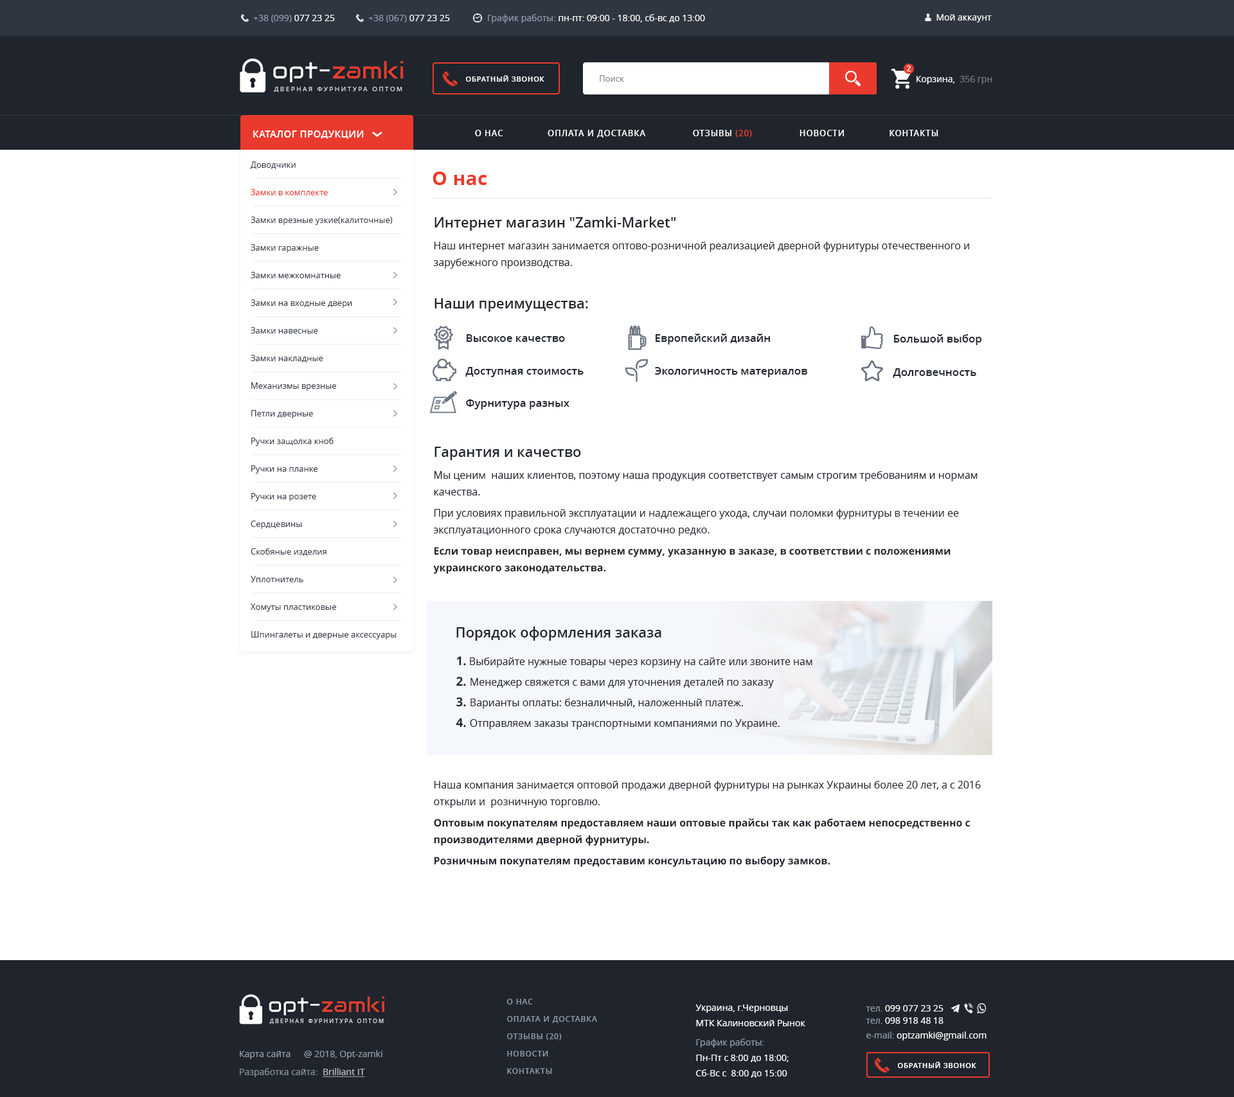
<style>
.page{position:relative;width:1234px;height:1097px;background:#ffffff}
.page>*{position:absolute;margin:0}
.t1{font:9px "OpenSans";color:#9099a7}
.t2{font:9px "OpenSans";color:#ffffff}
.t3{font:7.7px "OpenSans-Semibold";color:#ffffff}
.t4{font:7.1px "OpenSans-Semibold";letter-spacing:0.075em;color:#ffffff;text-transform:uppercase}
.t5{font:8.4px "OpenSans";color:#79818d}
.t6{font:9px "OpenSans";color:#747b86}
.t7{font:6.4px "OpenSans";letter-spacing:0.26em;color:#dfdfe0;text-transform:uppercase}
.t8{font:9.6px "OpenSans-Semibold";letter-spacing:0.025em;color:#ffffff;text-transform:uppercase}
.t9{font:8.4px "OpenSans-Semibold";letter-spacing:0.07em;color:#ffffff;text-transform:uppercase}
.t10{font:8.4px "OpenSans-Semibold";letter-spacing:0.07em;color:#ea3a2d;text-transform:uppercase}
.t11{font:8.4px/27.7px "OpenSans";color:#373e4a}
.t12{font:8.4px/27.7px "OpenSans";color:#ea3a2d}
.t13{font:19.3px "OpenSans-Bold";letter-spacing:0.01em;color:#ea3a2d}
.t14{font:14.1px "OpenSans-Semibold";color:#20252d}
.t15{font:10.3px/16.8px "OpenSans";color:#20252d}
.t16{font:10.9px "OpenSans-Semibold";color:#20252d}
.t17{font:10.3px/21.3px "OpenSans";color:#20252d}
.t18{font:10.3px/21.3px "OpenSans-Bold";color:#20252d}
.t19{font:10.3px/16.8px "OpenSans-Bold";color:#20252d}
.t20{font:10.3px/20.6px "OpenSans";color:#20252d}
.t21{font:12.2px/20.6px "OpenSans-Bold";color:#20252d}
.t22{font:7.7px/17.4px "OpenSans-Semibold";letter-spacing:0.07em;color:#9099a7;text-transform:uppercase}
.t23{font:9px/15.4px "OpenSans";color:#ffffff}
.t24{font:9px/19.3px "OpenSans";color:#9099a7}
.t25{font:9px/14.8px "OpenSans";color:#ffffff}
.t26{font:9px/14.8px "OpenSans";color:#9099a7}
.t27{font:9px/12.2px "OpenSans";color:#ffffff}
.t28{font:9px/12.2px "OpenSans";color:#9099a7}
.t29{font:5.6px "OpenSans";letter-spacing:0.26em;color:#dfdfe0;text-transform:uppercase}
.t30{font:9px "OpenSans";color:#868f9c}
.t31{font:9px "OpenSans";color:#bebebe;text-decoration:underline}
</style>
<div class="page">
<p class="t1" style="left:253px;top:15px;width:82px;height:7px">+38 (099)<span class="t2"> 077 23 25</span></p>
<p class="t1" style="left:368px;top:15px;width:82px;height:7px">+38 (067)<span class="t2"> 077 23 25</span></p>
<p class="t2" style="left:488px;top:14px;width:217px;height:9px"><span class="t1">График работы: </span>пн-пт: 09:00 - 18:00, сб-вс до 13:00</p>
<p class="t2" style="left:937px;top:14px;width:55px;height:8px">Мой аккаунт</p>
<p class="t3" style="left:907px;top:66px;width:5px;height:5px">2</p>
<p class="t4" style="left:466px;top:75px;width:78px;height:7px">Обратный звонок</p>
<p class="t5" style="left:600px;top:75px;width:24px;height:7px">Поиск</p>
<p class="t2" style="left:917px;top:76px;width:76px;height:8px">Корзина,  <span class="t6">356 грн</span></p>
<p class="t7" style="left:274px;top:87px;width:128px;height:5px">Дверная фурнитура оптом</p>
<p class="t8" style="left:253px;top:130px;width:111px;height:9px">каталог продукции</p>
<p class="t9" style="left:475px;top:130px;width:464px;height:8px">о нас                оплата и доставка                 Отзывы <span class="t10">(20) </span>                НОВОСТИ                Контакты</p>
<p class="t11" style="left:251px;top:161px;width:146px;height:479px">Доводчики<br><span class="t12">Замки в комплекте<br></span>Замки врезные узкие(калиточные)<br>Замки гаражные<br>Замки межкомнатные<br>Замки на входные двери<br>Замки навесные<br>Замки накладные<br>Механизмы врезные<br>Петли дверные<br>Ручки защолка кноб<br>Ручки на планке<br>Ручки на розете<br>Сердцевины<br>Скобяные изделия<br>Уплотнитель<br>Хомуты пластиковые<br>Шпингалеты и дверные аксессуары</p>
<p class="t13" style="left:433px;top:172px;width:54px;height:13px">О нас</p>
<p class="t14" style="left:435px;top:217px;width:241px;height:14px">Интернет магазин "Zamki-Market"</p>
<p class="t15" style="left:433px;top:242px;width:536px;height:27px">Наш интернет магазин занимается оптово-розничной реализацией дверной фурнитуры отечественного и зарубежного производства.</p>
<p class="t14" style="left:435px;top:298px;width:153px;height:14px">Наши преимущества:</p>
<p class="t16" style="left:467px;top:334px;width:98px;height:8px">Высокое качество</p>
<p class="t16" style="left:656px;top:334px;width:114px;height:11px">Европейский дизайн</p>
<p class="t16" style="left:894px;top:334px;width:88px;height:11px">Большой выбор товаров</p>
<p class="t16" style="left:465px;top:367px;width:119px;height:10px">Доступная стоимость</p>
<p class="t16" style="left:655px;top:367px;width:152px;height:10px">Экологичность материалов</p>
<p class="t16" style="left:893px;top:368px;width:84px;height:10px">Долговечность</p>
<p class="t16" style="left:466px;top:399px;width:104px;height:11px">Фурнитура разных типов</p>
<p class="t14" style="left:435px;top:447px;width:146px;height:13px">Гарантия и качество</p>
<p class="t15" style="left:433px;top:471px;width:545px;height:103px">Мы ценим  наших клиентов, поэтому наша продукция соответствует самым строгим требованиям и нормам качества.<span class="t17"><br>При условия</span>х правильной эксплуатации и надлежащего ухода, случаи поломки фурнитуры в течении ее эксплуатационного срока случаются достаточно редко. <br><span class="t18">Если товар неисправен, мы вернем сумму, указанную в з</span><span class="t19">аказе, в соответствии с положениями украинского законодательства.</span></p>
<p class="t14" style="left:456px;top:627px;width:206px;height:14px">Порядок оформления заказа</p>
<p class="t20" style="left:456px;top:656px;width:357px;height:74px"><span class="t21">1.</span> Выбирайте нужные товары через корзину на сайте или звоните нам<br><span class="t21">2. </span>Менеджер свяжется с вами для уточнения деталей по заказу<br><span class="t21">3. </span>Варианты оплаты: безналичный, наложенный платеж.<br><span class="t21">4. </span>Отправляем заказы транспортными компаниями по Украине.</p>
<p class="t15" style="left:434px;top:781px;width:547px;height:86px">Наша компания занимается оптовой продажи дверной фурнитуры на рынках Украины более 20 лет, а с 2016 открыли и  розничную торговлю.<br><span class="t18">Оптовым покупателям предоставля</span><span class="t19">ем наши оптовые прайсы так как работаем непосредственно с производителями дверной фурнитуры.</span><span class="t18"><br>Розничным покупателям предоставим консу</span><span class="t19">льтацию по выбору замков.</span></p>
<p class="t22" style="left:507px;top:999px;width:90px;height:75px">о нас<br>оплата и доставка<br>Отзывы (20)<br>НОВОСТИ<br>Контакты</p>
<p class="t23" style="left:696px;top:1005px;width:110px;height:73px">Украина, г.Черновцы<br>МТК Калиновский Рынок<br><span class="t24">График работы:<br></span>Пн-Пт с 8:00 до 18:00;<br>Сб-Вс с  8:00 до 15:00</p>
<p class="t25" style="left:866px;top:1005px;width:121px;height:36px"><span class="t26">тел.</span> 099 077 23 2<span class="t27">5<br></span><span class="t28">тел.</span><span class="t27"> 098 918 48 18<br></span><span class="t26">e-mail: </span>optzamki@gmail.com</p>
<p class="t29" style="left:269px;top:1019px;width:115px;height:5px">Дверная фурнитура оптом</p>
<p class="t1" style="left:240px;top:1051px;width:51px;height:8px">Карта сайта</p>
<p class="t1" style="left:304px;top:1050px;width:78px;height:9px">@ 2018, Opt-zamki</p>
<p class="t4" style="left:898px;top:1062px;width:79px;height:6px">Обратный звонок</p>
<p class="t30" style="left:240px;top:1068px;width:125px;height:9px">Разработка сайта:  <span class="t31">Brilliant IT</span></p>
</div>
